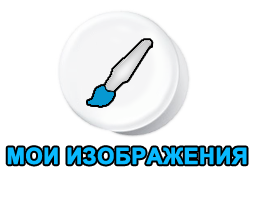
<style>
.page{position:relative;width:254px;height:200px;background:#ffffff}
.page>*{position:absolute;margin:0}
.t1{font:22px "Arial-BoldMT";color:#09baff;text-transform:uppercase;font-weight:bold}
</style>
<div class="page">
<p class="t1" style="left:7px;top:147px;width:240px;height:18px">Мои изображения</p>
</div>
